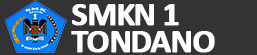
<style>
.page{position:relative;width:257px;height:55px;background:#333333}
.page>*{position:absolute;margin:0}
.t1{font:34px/27px "Calibri-Bold";letter-spacing:-0.05em;color:#ffffff;text-transform:uppercase;font-weight:bold}
</style>
<div class="page">
<p class="t1" style="left:71px;top:4px;width:144px;height:49px">SMKN 1<br>Tondano</p>
</div>
